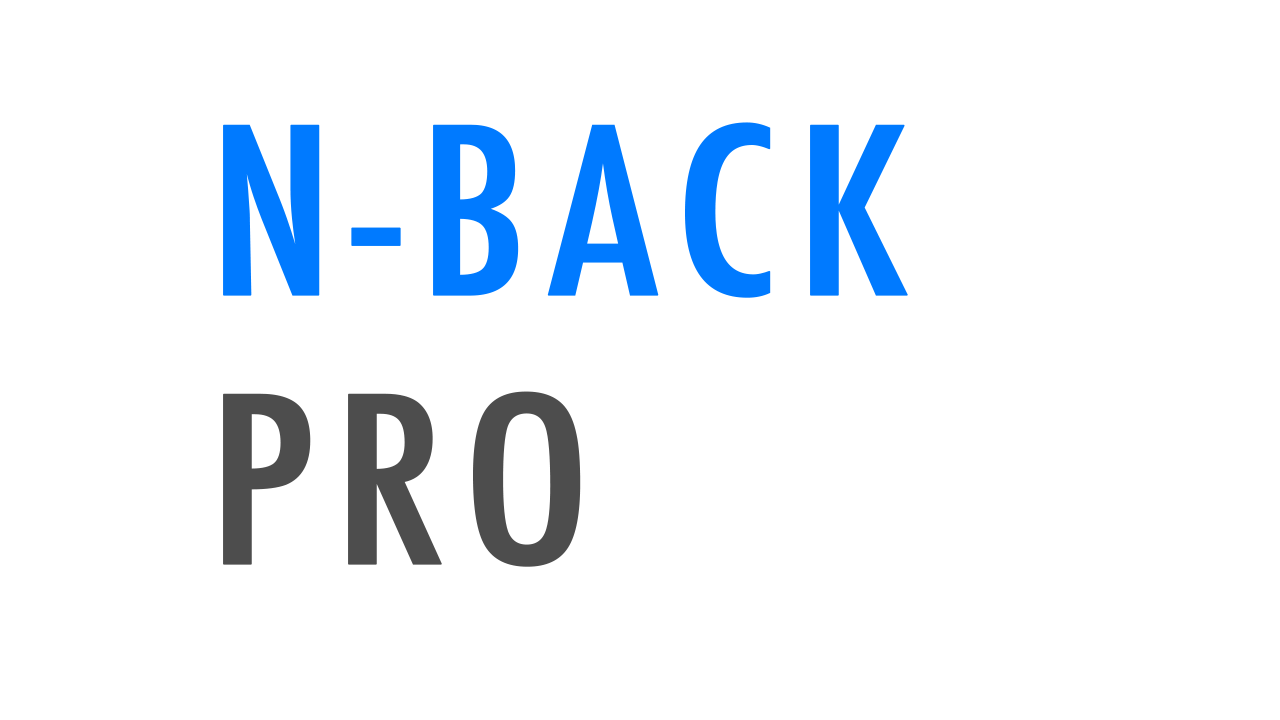
<style>
.page{position:relative;width:1280px;height:720px;background:#ffffff}
.page>*{position:absolute;margin:0}
.t1{font:224.7px/89.9px "Futura-CondensedMedium";letter-spacing:0.04em;color:#007aff;text-transform:uppercase;font-weight:bold;scale:1.2 1}
.t2{font:224.7px/89.9px "Futura-CondensedMedium";letter-spacing:0.04em;color:#4d4d4d;text-transform:uppercase;font-weight:bold;scale:1.2 1}
</style>
<div class="page">
<p class="t1" style="left:223px;top:122px;width:685px;height:445px">N-Back<br><br><br><span class="t2">Pro</span></p>
</div>
